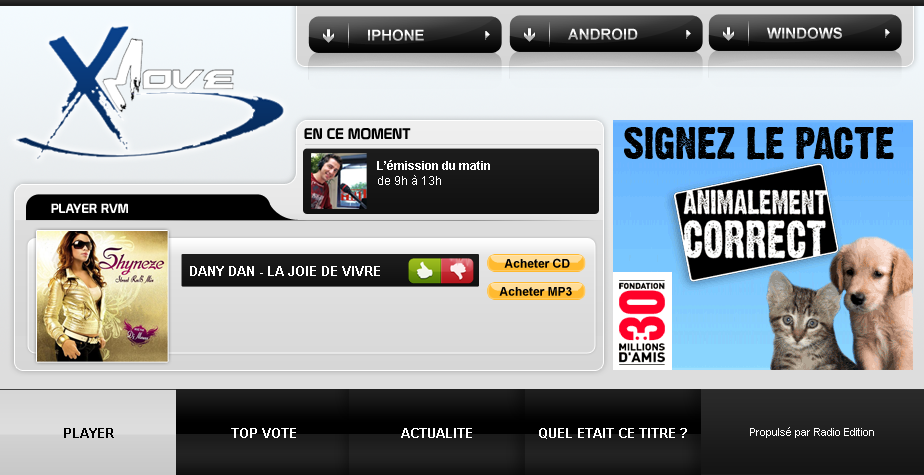
<style>
.page{position:relative;width:924px;height:475px}
.page>*{position:absolute;margin:0}
.t1{font:15px "Arial-BoldMT";text-transform:uppercase}
.t2{font:15px "Prototype";color:#000000;text-transform:uppercase}
.t3{font:12px/15px "Arial-BoldMT";color:#ffffff}
.t4{font:12px/15px "ArialMT";color:#ffffff}
.t5{font:13px "Prototype";color:#ffffff}
.t6{font:13px "Arial-BoldMT";color:#ffffff;text-transform:uppercase}
.t7{font:13px "Arial-BoldMT";color:#000000;text-transform:uppercase}
.t8{font:11px "ArialMT";color:#ffffff}
</style>
<div class="page">
<p class="t1" style="left:368px;top:29px;width:56px;height:12px">IPHONE</p>
<p class="t1" style="left:568px;top:28px;width:70px;height:12px">ANDROID</p>
<p class="t1" style="left:767px;top:27px;width:75px;height:12px">WINDOWS</p>
<p class="t2" style="left:304px;top:128px;width:107px;height:12px">EN CE MOMENT</p>
<p class="t3" style="left:377px;top:160px;width:113px;height:25px;text-align:justify">L’émission du matin<br><span class="t4">de 9h à 13h</span></p>
<p class="t5" style="left:51px;top:203px;width:77px;height:10px">PLAYER RVM</p>
<p class="t6" style="left:190px;top:266px;width:190px;height:10px">Dany dan - La joie de vivre</p>
<p class="t7" style="left:64px;top:428px;width:50px;height:10px">PLAYER</p>
<p class="t6" style="left:231px;top:428px;width:65px;height:10px">TOP VOTE</p>
<p class="t6" style="left:401px;top:428px;width:71px;height:10px">ACTUALITE</p>
<p class="t6" style="left:539px;top:428px;width:148px;height:11px">QUEL ETAIT CE TITRE ?</p>
<p class="t8" style="left:750px;top:427px;width:124px;height:11px">Propulsé par Radio Edition</p>
</div>
